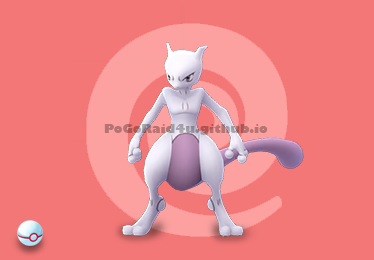
<style>
.page{position:relative;width:374px;height:260px;background:#f27776}
.page>*{position:absolute;margin:0}
.t1{font:12px "GillSans-UltraBold"}
</style>
<div class="page">
<p class="t1" style="left:104px;top:124px;width:164px;height:11px">PoGoRaid4u.github.io</p>
</div>
